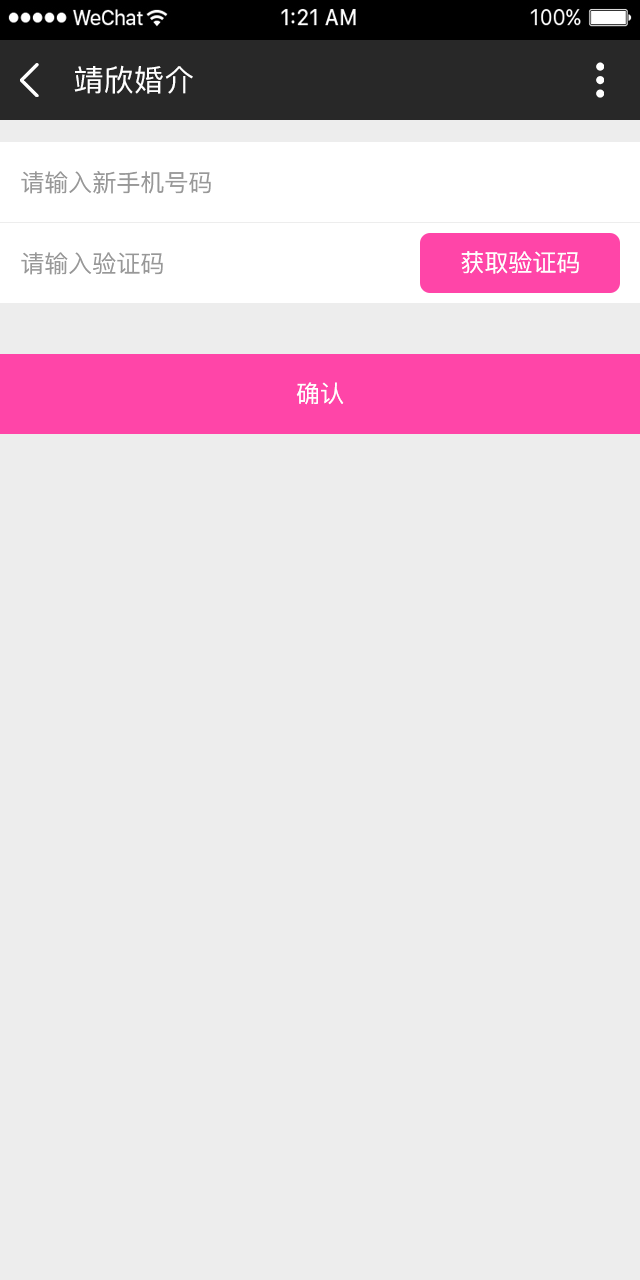
<style>
.page{position:relative;width:640px;height:1280px;background:#ededed}
.page>*{position:absolute;margin:0}
.t1{font:30px "PingFang-SC-Medium";letter-spacing:0.01em;color:#ffffff;text-transform:uppercase}
.t2{font:24px "PingFang-SC-Medium";color:#989898;text-transform:uppercase}
.t3{font:24px "PingFang-SC-Medium";color:#ffffff;text-transform:uppercase}
</style>
<div class="page">
<p class="t1" style="left:74px;top:65px;width:119px;height:29px">靖欣婚介</p>
<p class="t2" style="left:21px;top:171px;width:190px;height:23px">请输入新手机号码</p>
<p class="t2" style="left:21px;top:252px;width:142px;height:23px">请输入验证码</p>
<p class="t3" style="left:461px;top:251px;width:118px;height:23px">获取验证码</p>
<p class="t3" style="left:296px;top:382px;width:48px;height:23px">确认</p>
</div>
